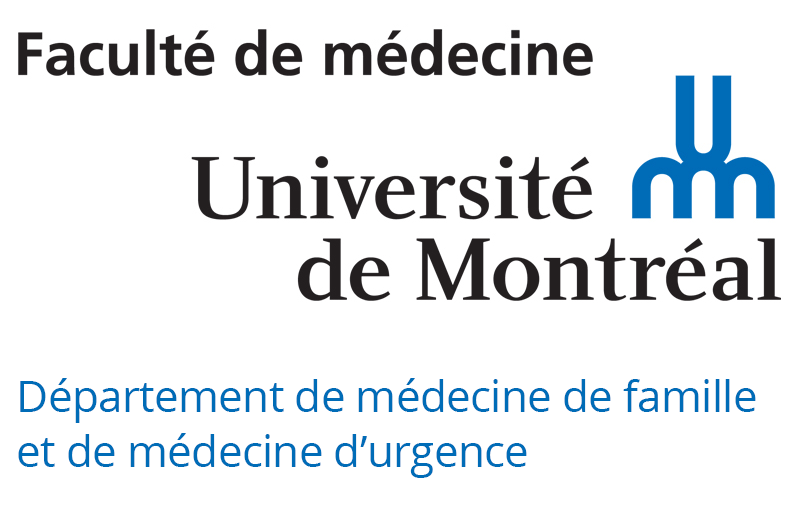
<style>
.page{position:relative;width:800px;height:513px;background:#ffffff}
.page>*{position:absolute;margin:0}
.t1{font:44px/55px "OpenSans";letter-spacing:-0.015em;color:#006cb7}
</style>
<div class="page">
<p class="t1" style="left:18px;top:378px;width:738px;height:100px">Département de médecine de famille<br>et de médecine d’urgence</p>
</div>
